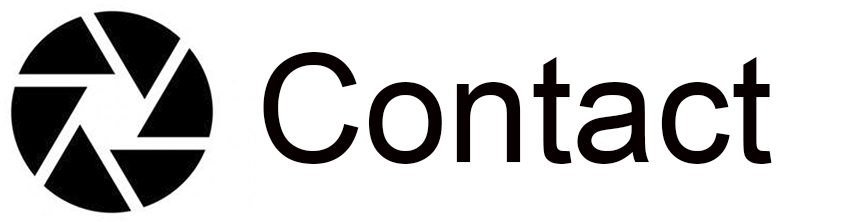
<style>
.page{position:relative;width:858px;height:222px;background:#ffffff}
.page>*{position:absolute;margin:0}
.t1{font:150px "ArialMT";color:#080000}
</style>
<div class="page">
<p class="t1" style="left:263px;top:52px;width:509px;height:112px">Contact</p>
</div>
